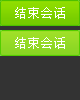
<style>
.page{position:relative;width:80px;height:100px;background:#333333}
.page>*{position:absolute;margin:0}
.t1{font:12px "SimSun";letter-spacing:0.1em;color:#ffffff}
</style>
<div class="page">
<p class="t1" style="left:15px;top:7px;width:50px;height:12px">结束会话</p>
<p class="t1" style="left:15px;top:37px;width:50px;height:12px">结束会话</p>
</div>
